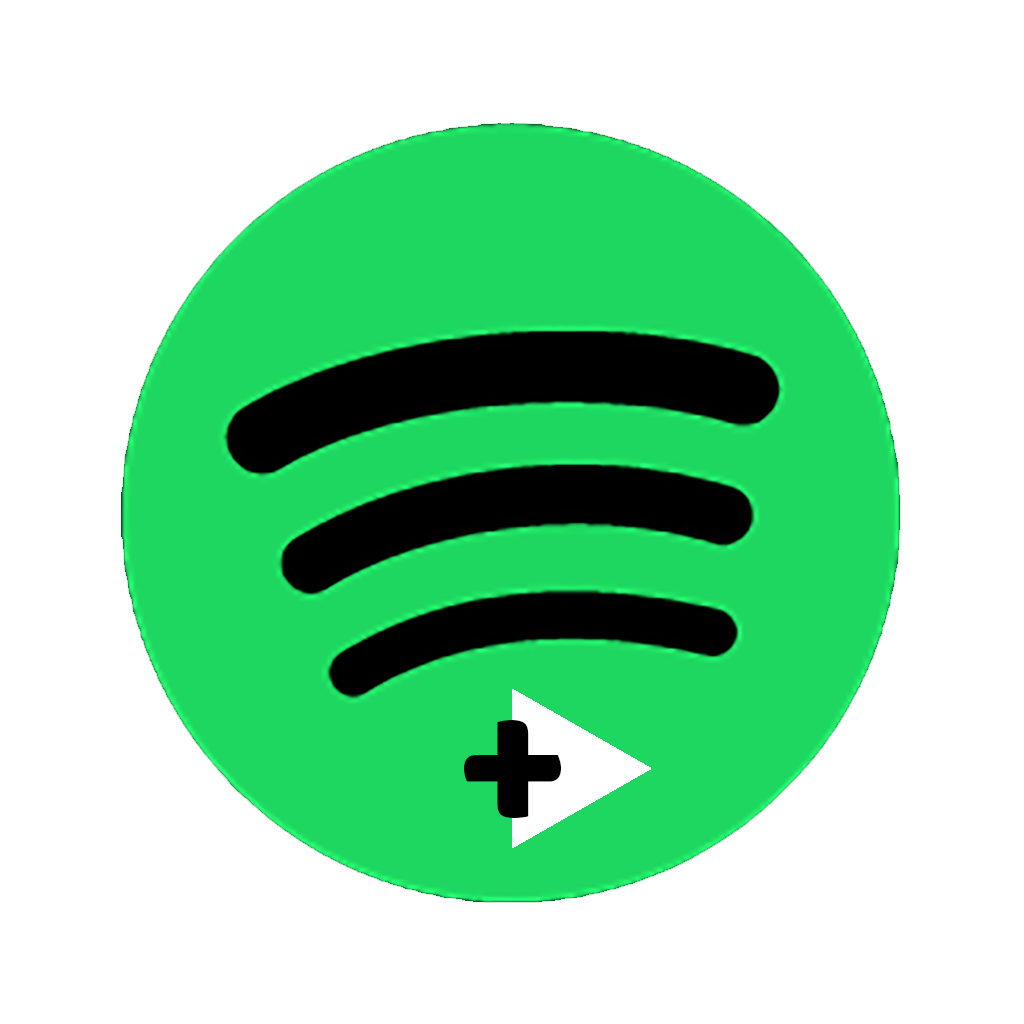
<style>
.page{position:relative;width:1024px;height:1024px;background:#ffffff}
.page>*{position:absolute;margin:0}
.t1{font:200px "Baloo-Regular";letter-spacing:0.1em;color:#000000}
</style>
<div class="page">
<p class="t1" style="left:464px;top:720px;width:97px;height:98px">+</p>
</div>
